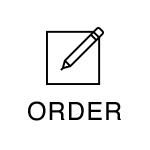
<style>
.page{position:relative;width:150px;height:150px;background:#ffffff}
.page>*{position:absolute;margin:0}
.t1{font:25px "Helvetica";letter-spacing:0.05em;color:#000000}
</style>
<div class="page">
<p class="t1" style="left:28px;top:101px;width:93px;height:20px">ORDER</p>
</div>
